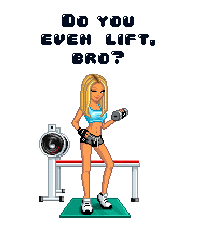
<style>
.page{position:relative;width:200px;height:225px;background:#ffffff}
.page>*{position:absolute;margin:0}
.t1{font:15.6px "04b30";color:#050e21}
</style>
<div class="page">
<p class="t1" style="left:41px;top:14px;width:114px;height:50px;text-align:center">Do you even lift, bro?</p>
</div>
